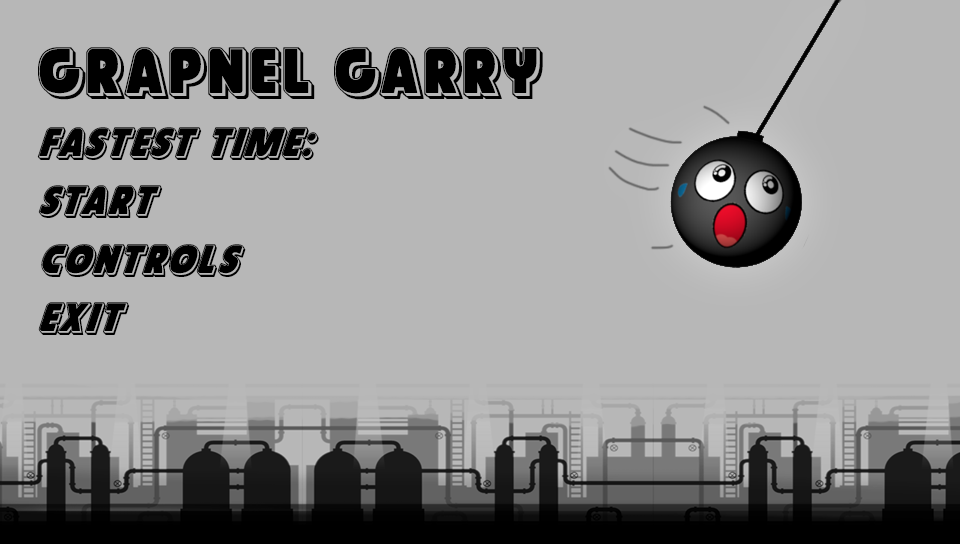
<style>
.page{position:relative;width:960px;height:544px;background:#b7b7b7}
.page>*{position:absolute;margin:0}
.t1{font:66.7px "GovernorPunch";color:#000000}
.t2{font:41.7px/58.3px "GovernorPunchItalic";color:#000000}
</style>
<div class="page">
<p class="t1" style="left:38px;top:47px;width:505px;height:53px">Grapnel Garry</p>
<p class="t2" style="left:37px;top:127px;width:282px;height:208px">fastest time:<br>Start<br>Controls<br>exit</p>
</div>
